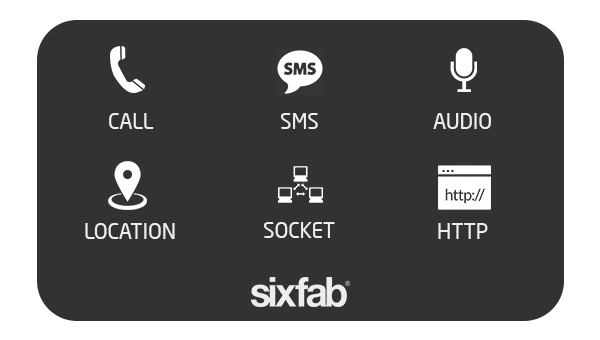
<style>
.page{position:relative;width:600px;height:340px;background:#323232}
.page>*{position:absolute;margin:0}
.t1{font:20.8px "NeoSansPro-Regular";color:#efedee}
</style>
<div class="page">
<p class="t1" style="left:109px;top:113px;width:45px;height:16px">CALL</p>
<p class="t1" style="left:281px;top:113px;width:37px;height:16px">SMS</p>
<p class="t1" style="left:433px;top:113px;width:58px;height:16px">AUDIO</p>
<p class="t1" style="left:264px;top:222px;width:71px;height:16px">SOCKET</p>
<p class="t1" style="left:85px;top:223px;width:90px;height:16px">LOCATION</p>
<p class="t1" style="left:438px;top:223px;width:50px;height:16px">HTTP</p>
</div>
